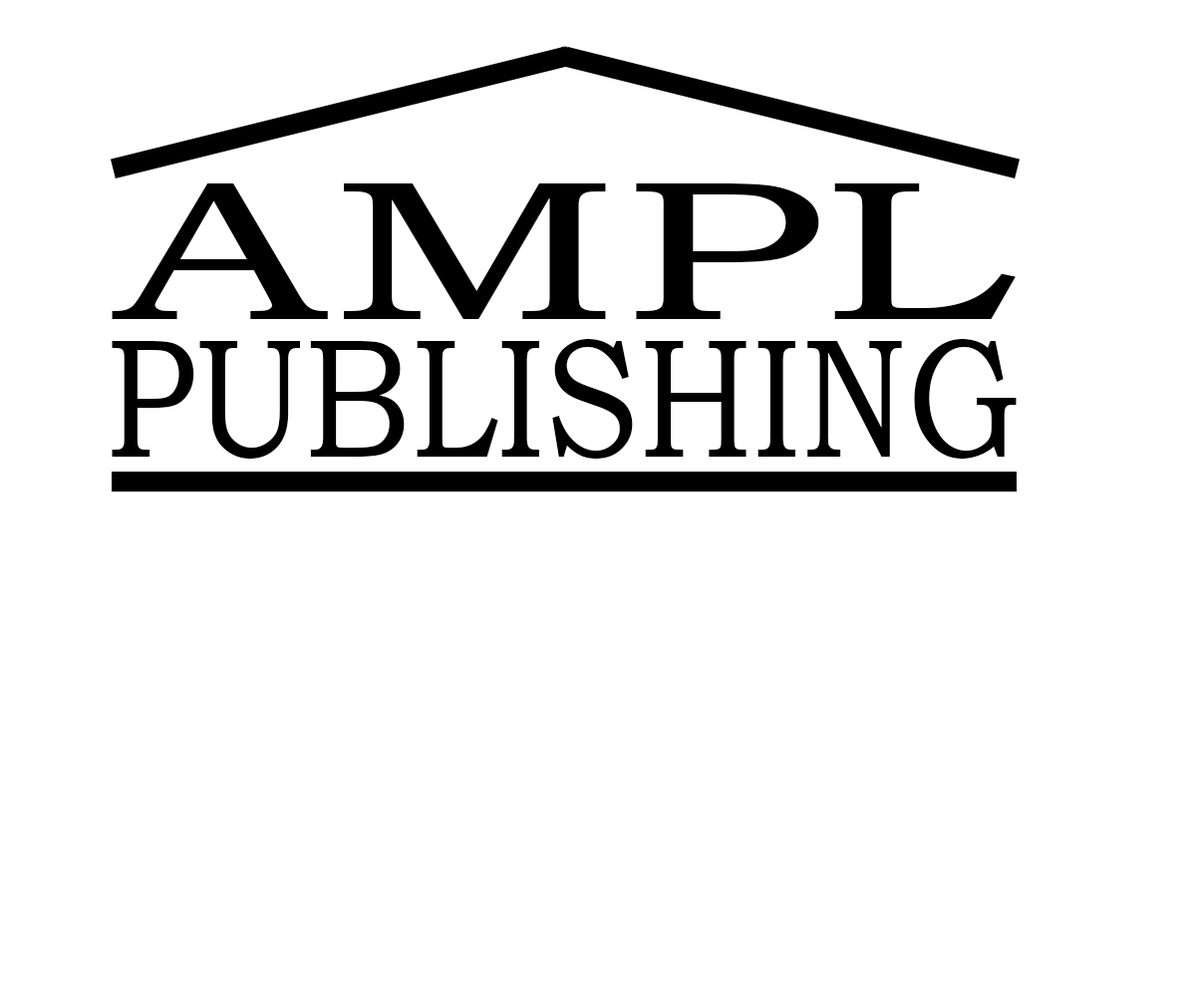
<style>
.page{position:relative;width:1196px;height:997px;background:#ffffff}
.page>*{position:absolute;margin:0}
.t1{font:198.8px "BookmanOldStyle";color:#000000;scale:1.61 1}
.t2{font:170.4px "BookmanOldStyle";color:#000000;scale:0.84 1}
</style>
<div class="page">
<p class="t1" style="left:112px;top:183px;width:904px;height:136px">AMPL</p>
<p class="t2" style="left:112px;top:339px;width:905px;height:120px">PUBLISHING</p>
</div>
